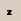
<style>
.page{position:relative;width:21px;height:21px;background:#d9cdc1}
.page>*{position:absolute;margin:0}
.t1{font:9px "Tahoma-Bold";color:#000000}
</style>
<div class="page">
<p class="t1" style="left:7px;top:10px;width:5px;height:5px">z</p>
</div>
